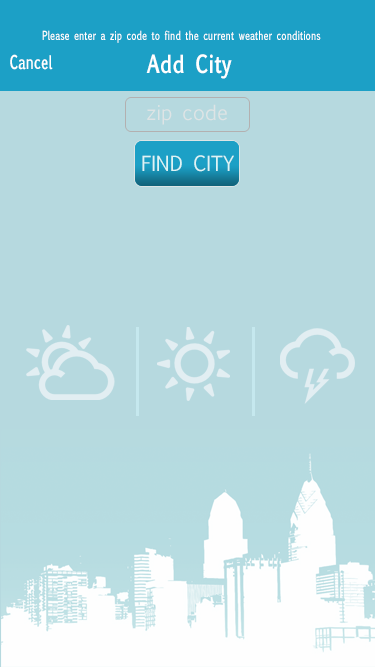
<style>
.page{position:relative;width:375px;height:667px;background:#b6d9df}
.page>*{position:absolute;margin:0}
.t1{font:12px "EuphemiaUCAS-Bold";color:#ffffff;scale:0.7 1}
.t2{font:18px "EuphemiaUCAS-Bold";color:#ffffff;scale:0.7 1}
.t3{font:24px "EuphemiaUCAS-Bold";color:#ffffff;scale:0.8 1}
.t4{font:20px "EuphemiaUCAS";color:#dde3e4}
.t5{font:20px "EuphemiaUCAS";color:#def4f5}
</style>
<div class="page">
<p class="t1" style="left:42px;top:30px;width:279px;height:13px">Please enter a zip code to find the current weather conditions</p>
<p class="t2" style="left:10px;top:54px;width:43px;height:16px">Cancel</p>
<p class="t3" style="left:146px;top:54px;width:86px;height:25px">Add City</p>
<p class="t4" style="left:147px;top:104px;width:80px;height:21px">zip code</p>
<p class="t5" style="left:142px;top:155px;width:92px;height:17px">FIND CITY</p>
</div>
